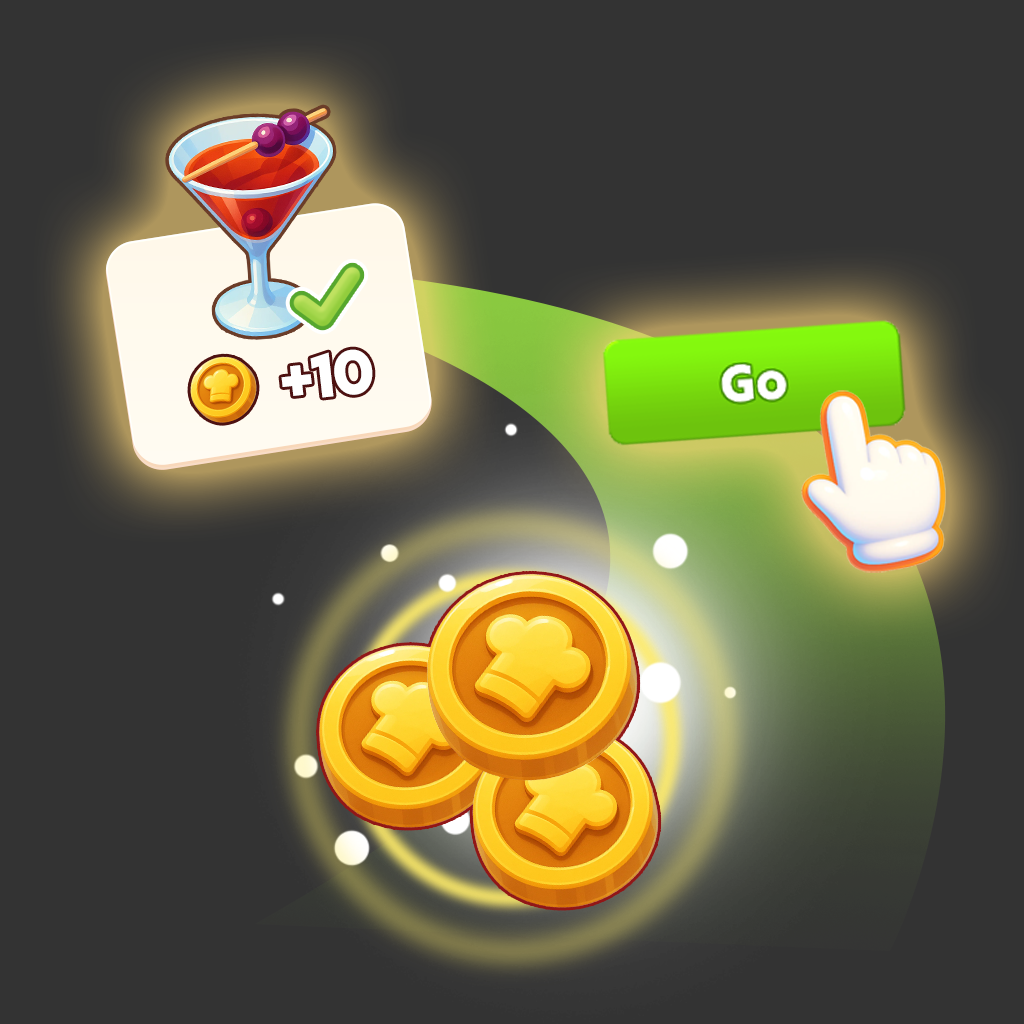
<style>
.page{position:relative;width:1024px;height:1024px;background:#333333}
.page>*{position:absolute;margin:0}
.t1{font:63.7px "TiltWarp-Regular";letter-spacing:-0.035em;color:#ffffff;text-transform:uppercase}
</style>
<div class="page">
<p class="t1" style="left:281px;top:349px;width:92px;height:49px;rotate:-6deg">+10</p>
</div>
